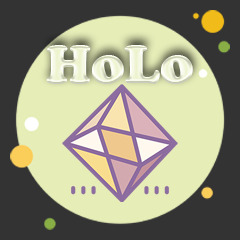
<style>
.page{position:relative;width:240px;height:240px;background:#333333}
.page>*{position:absolute;margin:0}
.t1{font:55.6px "CooperBlack"}
</style>
<div class="page">
<p class="t1" style="left:46px;top:45px;width:147px;height:39px">HoLo</p>
</div>
